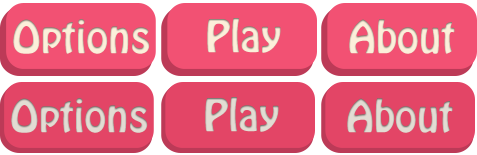
<style>
.page{position:relative;width:477px;height:155px;background:#f25173}
.page>*{position:absolute;margin:0}
.t1{font:40px "HoboStd";color:#fcefda}
.t2{font:40px "HoboStd";color:#e2dcd3}
</style>
<div class="page">
<p class="t1" style="left:13px;top:19px;width:137px;height:35px">Options</p>
<p class="t1" style="left:207px;top:18px;width:74px;height:35px">Play</p>
<p class="t1" style="left:349px;top:19px;width:106px;height:35px">About</p>
<p class="t2" style="left:11px;top:98px;width:137px;height:35px">Options</p>
<p class="t2" style="left:205px;top:97px;width:74px;height:35px">Play</p>
<p class="t2" style="left:347px;top:98px;width:106px;height:35px">About</p>
</div>
